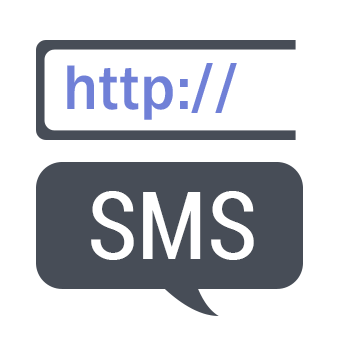
<style>
.page{position:relative;width:355px;height:345px;background:#ffffff}
.page>*{position:absolute;margin:0}
.t1{font:65.3px "FranklinGothic-Medium";color:#7080d7}
.t2{font:65.3px "Roboto-Condensed";color:#7080d7}
.t3{font:95.2px "Roboto-Condensed";color:#ffffff}
</style>
<div class="page">
<p class="t1" style="left:67px;top:63px;width:170px;height:57px">http:<span class="t2">//</span></p>
<p class="t3" style="left:91px;top:191px;width:163px;height:69px">SMS</p>
</div>
